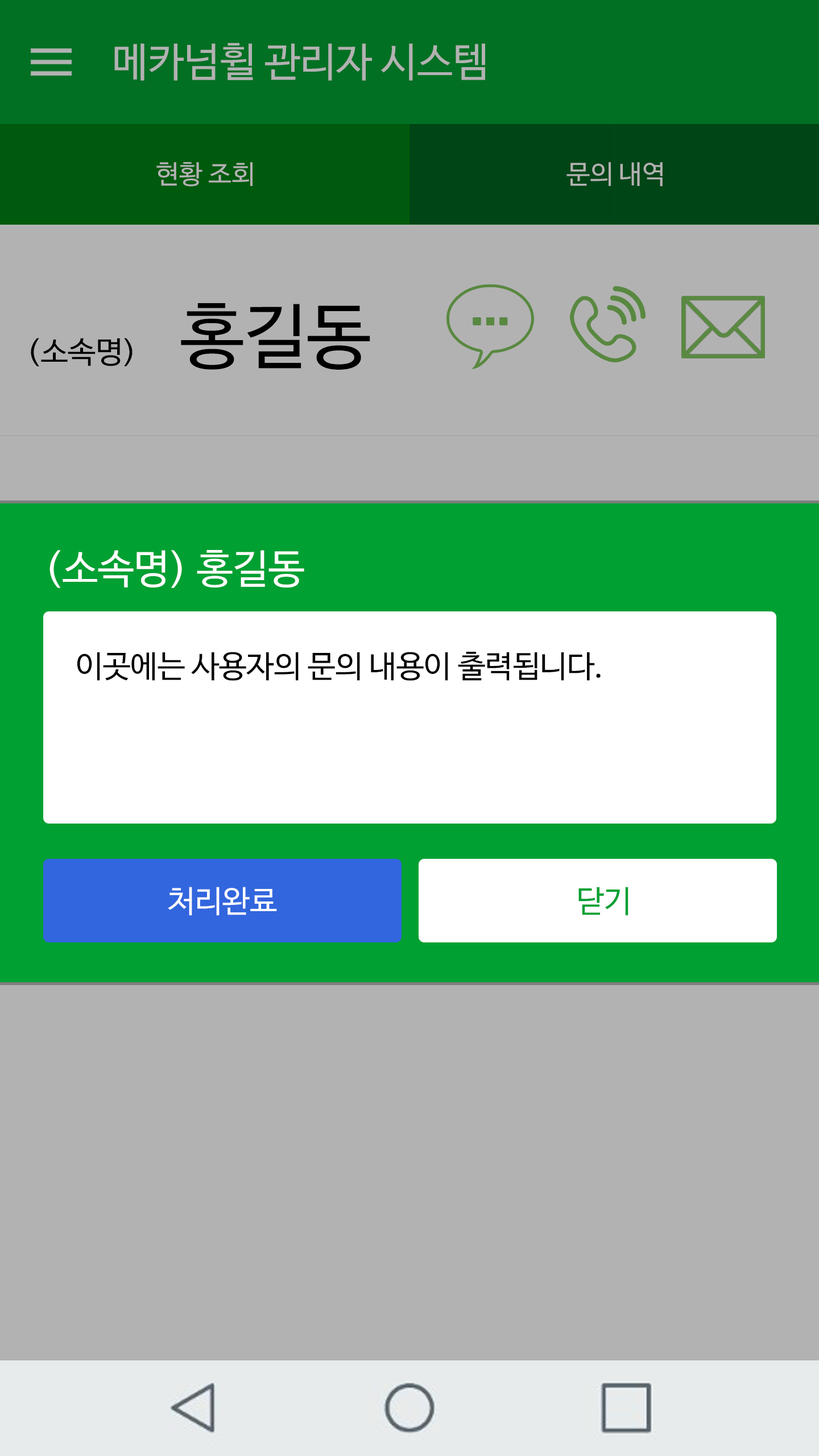
<style>
.page{position:relative;width:819px;height:1456px;background:#b2b2b2}
.page>*{position:absolute;margin:0}
.t1{font:40.3px "NanumBarunGothicOTF";color:#b2b2b2}
.t2{font:26.1px "NanumBarunGothicOTF";color:#b2b2b2}
.t3{font:71.1px "NanumBarunGothicOTF";color:#000000}
.t4{font:30.2px "NanumBarunGothicOTF";color:#000000;scale:1.03 1}
.t5{font:40.3px "NanumBarunGothicOTF";color:#ffffff}
.t6{font:30.8px "NanumBarunGothicOTF";color:#000000}
.t7{font:30.8px "NanumBarunGothicOTF";color:#ffffff}
.t8{font:30.8px "NanumBarunGothicOTF";color:#01a032}
</style>
<div class="page">
<p class="t1" style="left:114px;top:43px;width:371px;height:38px">메카넘휠 관리자 시스템</p>
<p class="t2" style="left:156px;top:162px;width:97px;height:25px">현황 조회</p>
<p class="t2" style="left:566px;top:162px;width:97px;height:25px">문의 내역</p>
<p class="t3" style="left:181px;top:303px;width:189px;height:67px">홍길동</p>
<p class="t4" style="left:31px;top:338px;width:102px;height:28px">(소속명)</p>
<p class="t5" style="left:49px;top:550px;width:255px;height:38px">(소속명) 홍길동</p>
<p class="t6" style="left:77px;top:652px;width:524px;height:29px">이곳에는 사용자의 문의 내용이 출력됩니다.</p>
<p class="t7" style="left:168px;top:887px;width:109px;height:29px">처리완료</p>
<p class="t8" style="left:578px;top:887px;width:50px;height:29px">닫기</p>
</div>
